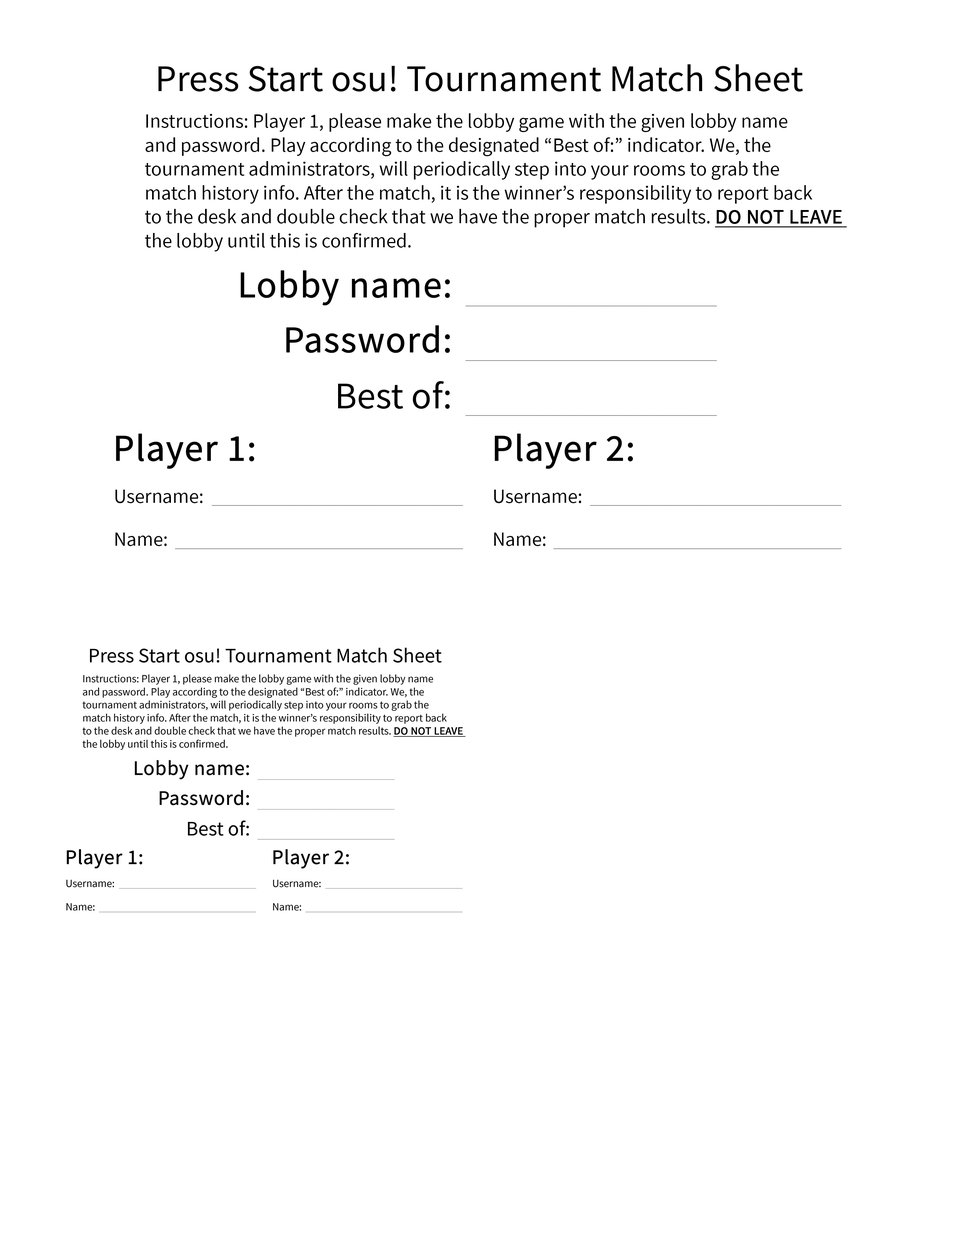
<style>
.page{position:relative;width:960px;height:1242px;background:#ffffff}
.page>*{position:absolute;margin:0}
.t1{font:37.8px "SourceSansPro-Regular";color:#000000}
.t2{font:19.9px "SourceSansPro-Regular";color:#000000}
.t3{font:19.9px "SourceSansPro-Regular";color:#000000;font-weight:bold;text-decoration:underline}
.t4{font:37.8px "SourceSansPro-Regular";color:#000000;font-weight:bold}
</style>
<div class="page">
<p class="t1" style="left:158px;top:64px;width:645px;height:28px">Press Start osu! Tournament Match Sheet</p>
<p class="t2" style="left:145px;top:113px;width:702px;height:138px">Instructions: Player 1, please make the lobby game with the given lobby name <br>and password. Play according to the designated “Best of:” indicator. We, the <br>tournament administrators, will periodically step into your rooms to grab the <br>match history info. After the match, it is the winner’s responsibility to report back<br>to the desk and double check that we have the proper match results. <span class="t3">DO NOT LEAVE <br></span>the lobby until this is confirmed.</p>
<p class="t4" style="left:241px;top:270px;width:209px;height:36px">Lobby name:</p>
<p class="t4" style="left:286px;top:325px;width:164px;height:28px">Password:</p>
<p class="t1" style="left:338px;top:381px;width:112px;height:28px">Best of:</p>
<p class="t4" style="left:116px;top:434px;width:138px;height:35px">Player 1:</p>
<p class="t4" style="left:495px;top:434px;width:138px;height:35px">Player 2:</p>
<p class="t2" style="left:115px;top:490px;width:88px;height:13px">Username:</p>
<p class="t2" style="left:494px;top:490px;width:87px;height:13px">Username:</p>
<p class="t2" style="left:115px;top:533px;width:52px;height:13px">Name:</p>
<p class="t2" style="left:494px;top:533px;width:51px;height:13px">Name:</p>
</div>
